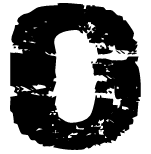
<style>
.page{position:relative;width:151px;height:154px;background:#000000}
.page>*{position:absolute;margin:0}
.t1{font:146px "Destroy";color:#000000;font-weight:bold;scale:1.15 1}
</style>
<div class="page">
<p class="t1" style="left:10px;top:3px;width:131px;height:147px">O</p>
</div>
